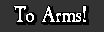
<style>
.page{position:relative;width:104px;height:32px;background:#333333}
.page>*{position:absolute;margin:0}
.t1{font:24px "CaslonAntique-Bold";color:#ffffff}
</style>
<div class="page">
<p class="t1" style="left:14px;top:6px;width:72px;height:16px">To Arms!</p>
</div>
